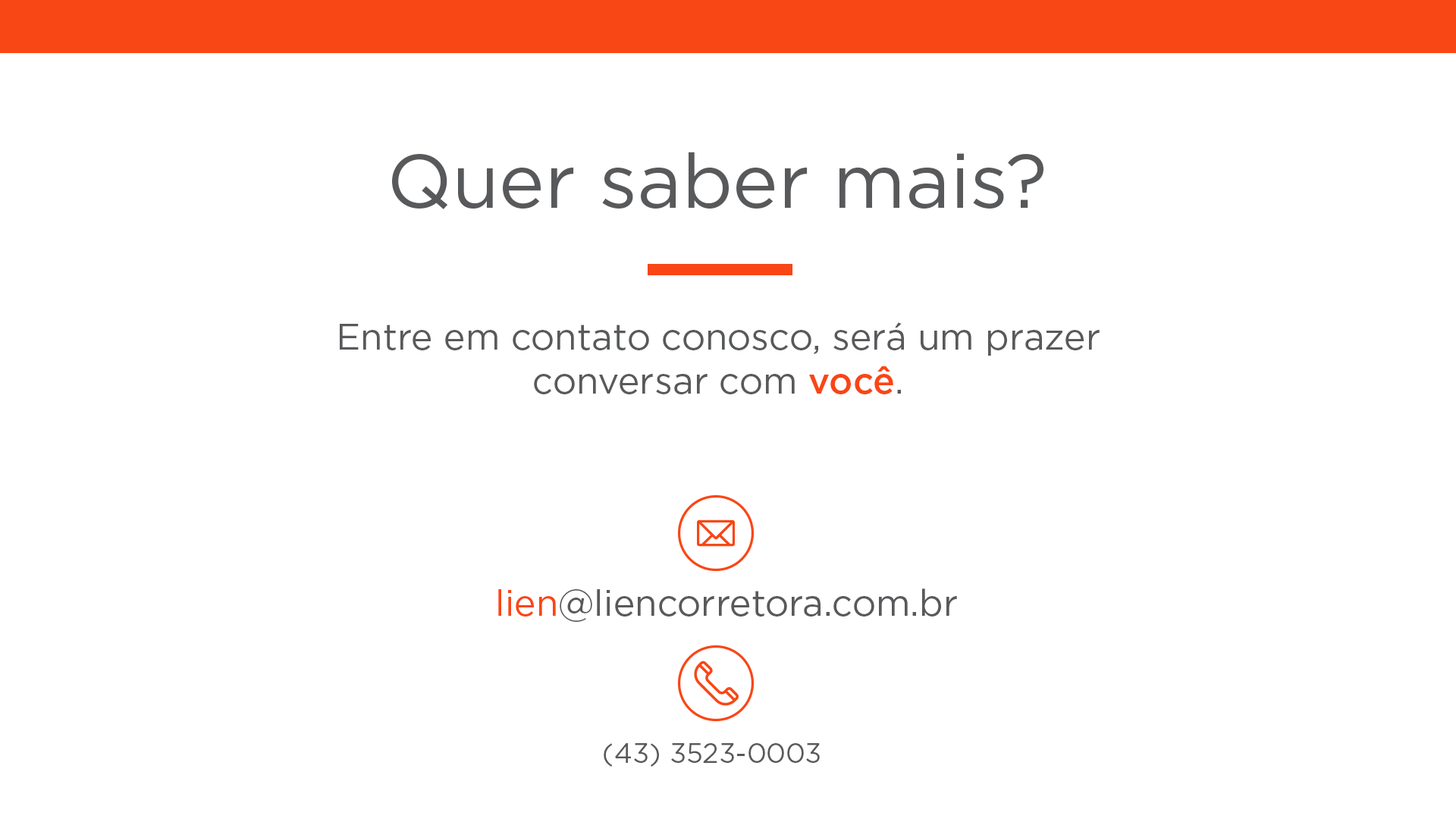
<style>
.page{position:relative;width:1456px;height:819px;background:#ffffff}
.page>*{position:absolute;margin:0}
.t1{font:75.8px "Gotham-Book";color:#58595b}
.t2{font:36.4px "Gotham-Book";color:#58595b}
.t3{font:36.4px "Gotham-Medium";color:#f94615}
.t4{font:36.4px "Gotham-Book";color:#f94615}
.t5{font:27.3px "Gotham-Book";color:#58595b}
</style>
<div class="page">
<p class="t1" style="left:392px;top:152px;width:651px;height:57px">Quer saber mais?</p>
<p class="t2" style="left:340px;top:322px;width:760px;height:72px;text-align:center">Entre em contato conosco, será um prazer conversar com <span class="t3">você</span>.</p>
<p class="t2" style="left:498px;top:588px;width:459px;height:34px"><span class="t4">lien</span>@liencorretora.com.br</p>
<p class="t5" style="left:604px;top:743px;width:216px;height:24px">(43) 3523-0003</p>
</div>
